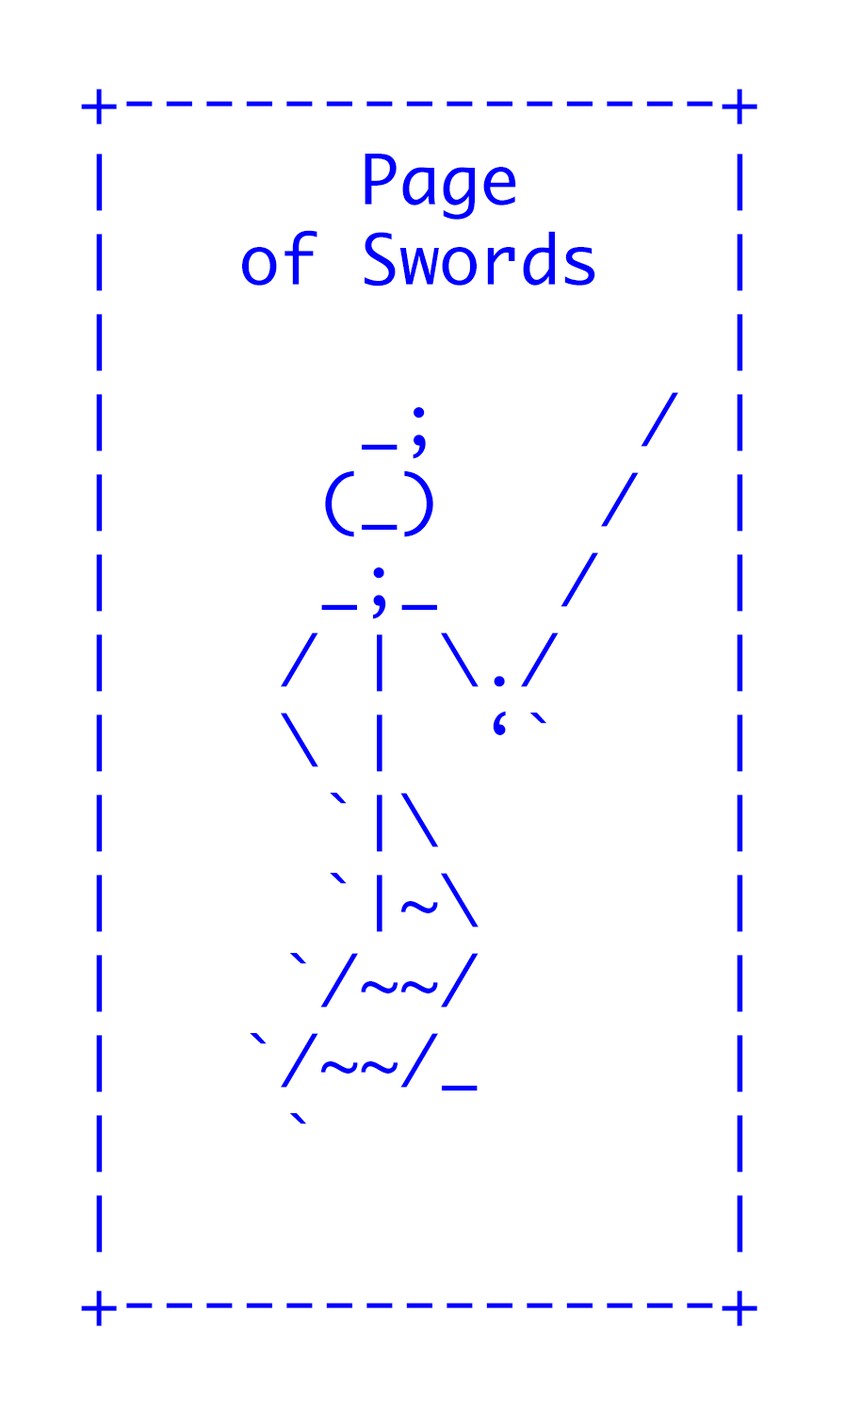
<style>
.page{position:relative;width:845px;height:1411px;background:#ffffff}
.page>*{position:absolute;margin:0}
.t1{font:66.7px "Monaco";color:#0000ff}
</style>
<div class="page">
<p class="t1" style="left:81px;top:89px;width:677px;height:1237px">+---------------+<br>│      Page     │<br>│   of Swords   │<br>│               │<br>│      _;     / │<br>│     (_)    /  │<br>│     _;_   /   │<br>│    / │ \./    │ <br>│    \ │  ‘`    │ <br>│     `│\       │<br>│     `│~\      │ <br>│    `/~~/      │ <br>│   `/~~/_      │<br>│    `          │<br>│               │<br>+---------------+</p>
</div>
